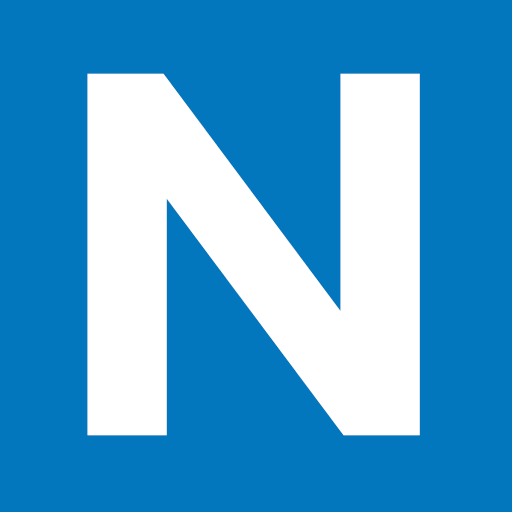
<style>
.page{position:relative;width:512px;height:512px;background:#0277bd}
.page>*{position:absolute;margin:0}
.t1{font:503.1px "CenturyGothic-Bold";color:#ffffff;scale:1.15 1}
</style>
<div class="page">
<p class="t1" style="left:87px;top:73px;width:333px;height:363px">N</p>
</div>
